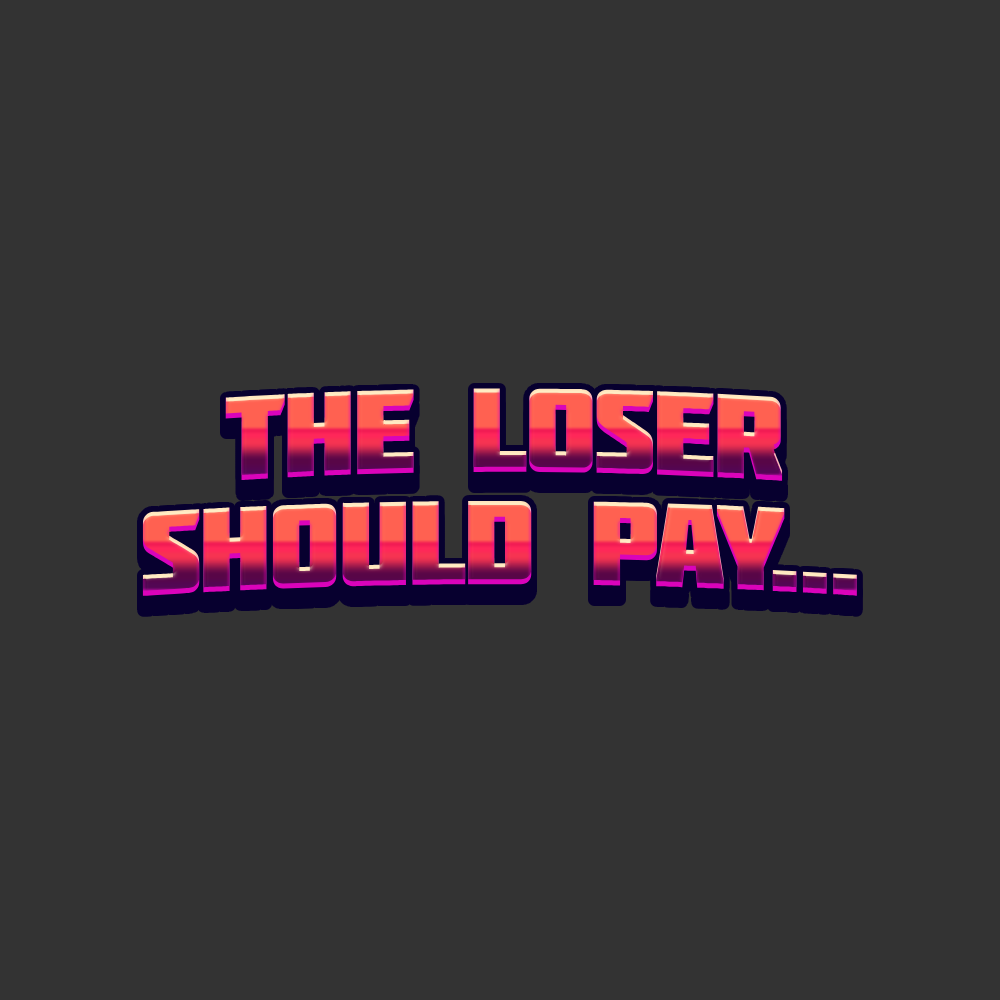
<style>
.page{position:relative;width:1000px;height:1000px;background:#333333}
.page>*{position:absolute;margin:0}
.t1{font:119px "Molot";letter-spacing:-0.025em}
</style>
<div class="page">
<p class="t1" style="left:225px;top:388px;width:558px;height:93px">THE LOSER</p>
<p class="t1" style="left:142px;top:500px;width:715px;height:96px">SHOULD PAY...</p>
</div>
